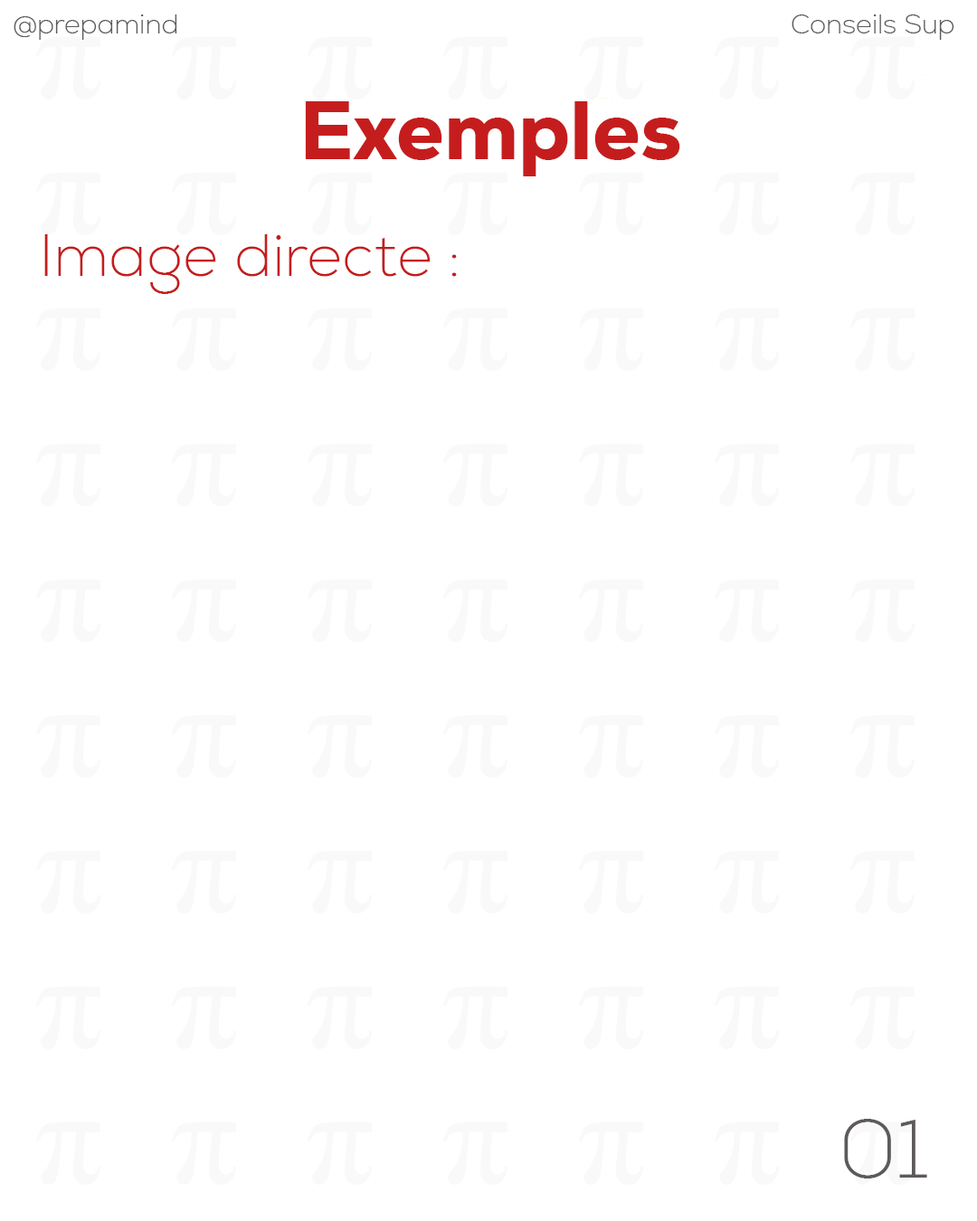
<style>
.page{position:relative;width:977px;height:1221px;background:#ffffff}
.page>*{position:absolute;margin:0}
.t1{font:27.1px "Nexa-ExtraLight";color:#5e5a5a}
.t2{font:81.4px "Nexa-Heavy";color:#c51d1d}
.t3{font:60px "Nexa-ExtraLight";color:#c51d1d}
.t4{font:81.7px "Nexa-ExtraLight";color:#5e5a5a}
</style>
<div class="page">
<p class="t1" style="left:14px;top:14px;width:163px;height:26px">@prepamind</p>
<p class="t1" style="left:791px;top:14px;width:163px;height:26px">Conseils Sup</p>
<p class="t2" style="left:305px;top:101px;width:375px;height:75px">Exemples</p>
<p class="t3" style="left:44px;top:234px;width:413px;height:60px">Image directe :</p>
<p class="t4" style="left:844px;top:1119px;width:83px;height:59px">01</p>
</div>
